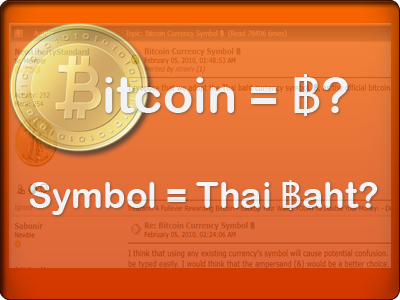
<style>
.page{position:relative;width:400px;height:300px}
.page>*{position:absolute;margin:0}
.t1{font:50px "ArialRoundedMTBold";color:#f1f2f3}
.t2{font:50px "Tahoma";color:#f1f2f3}
.t3{font:36px "ArialRoundedMTBold";color:#f2f2f4}
.t4{font:36px "Tahoma";color:#f2f2f4}
</style>
<div class="page">
<p class="t1" style="left:105px;top:74px;width:243px;height:42px">itcoin = <span class="t2">฿</span>?</p>
<p class="t3" style="left:29px;top:180px;width:349px;height:35px">Symbol = Thai <span class="t4">฿</span>aht?</p>
</div>
